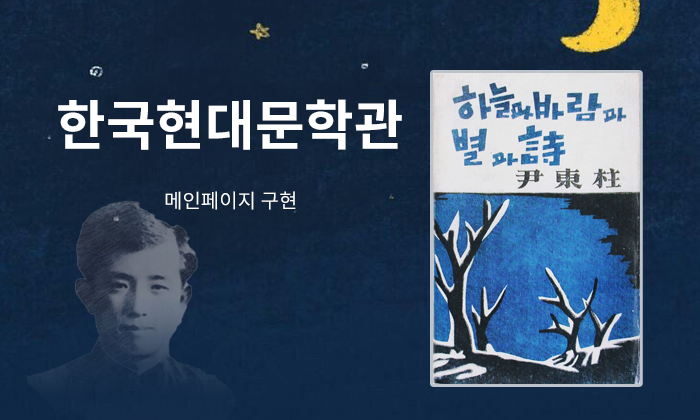
<style>
.page{position:relative;width:700px;height:420px}
.page>*{position:absolute;margin:0}
.t1{font:54px "NotoSansKR-Bold";color:#ffffff}
.t2{font:20px "NotoSansKR-Regular";color:#ffffff}
</style>
<div class="page">
<p class="t1" style="left:58px;top:99px;width:344px;height:51px">한국현대문학관</p>
<p class="t2" style="left:165px;top:191px;width:131px;height:19px">메인페이지 구현</p>
</div>
